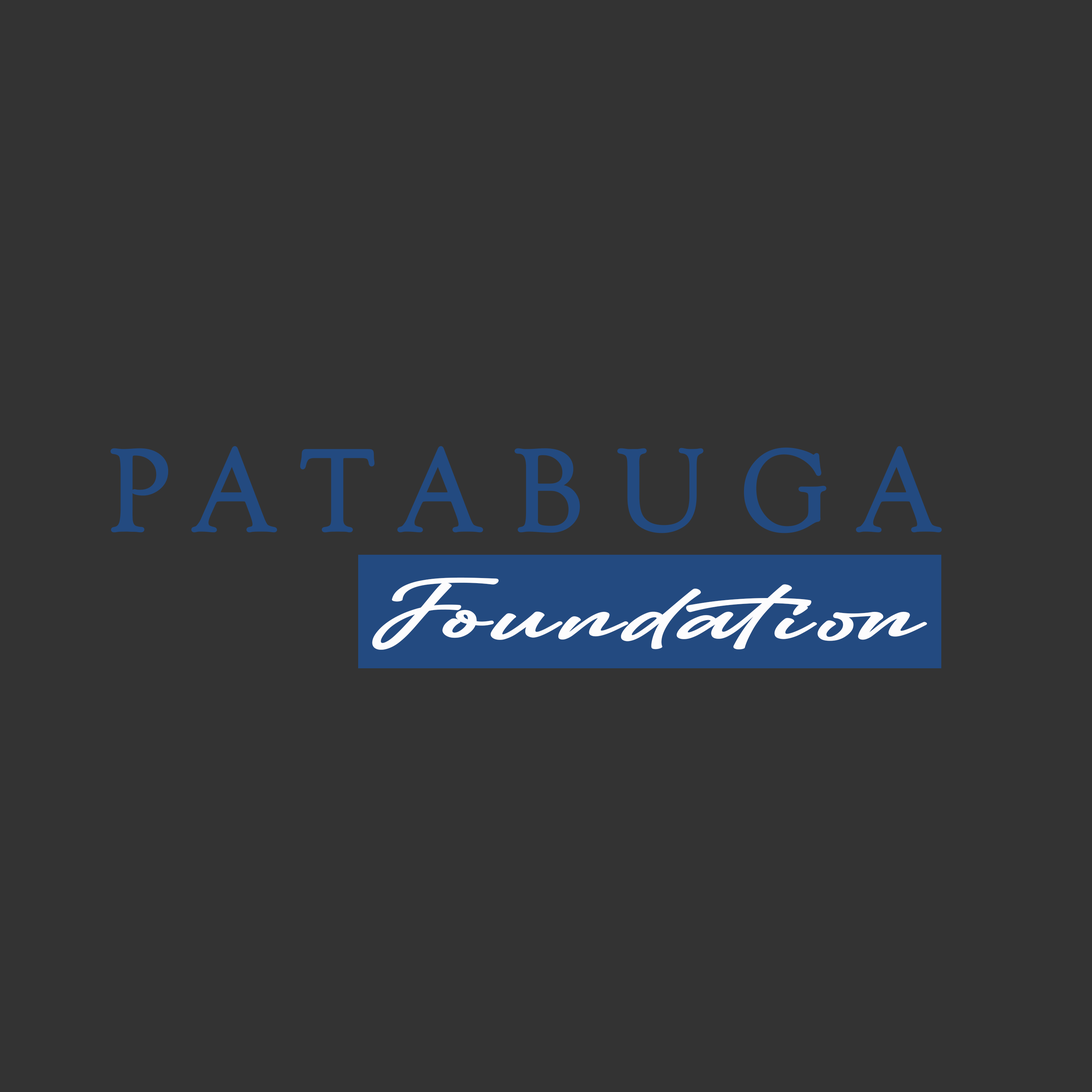
<style>
.page{position:relative;width:1092px;height:1092px;background:#333333}
.page>*{position:absolute;margin:0}
.t1{font:118.9px "GoudyOldStyleT-Regular";letter-spacing:0.26em;color:#234a80;font-weight:bold}
.t2{font:71.7px "AmerthaPERSONALUSEONLY";letter-spacing:0.08em;color:#fcfcfd;scale:1.67 1}
</style>
<div class="page">
<p class="t1" style="left:110px;top:446px;width:832px;height:87px">PATABUGA</p>
<p class="t2" style="left:372px;top:577px;width:555px;height:73px">Foundation</p>
</div>
